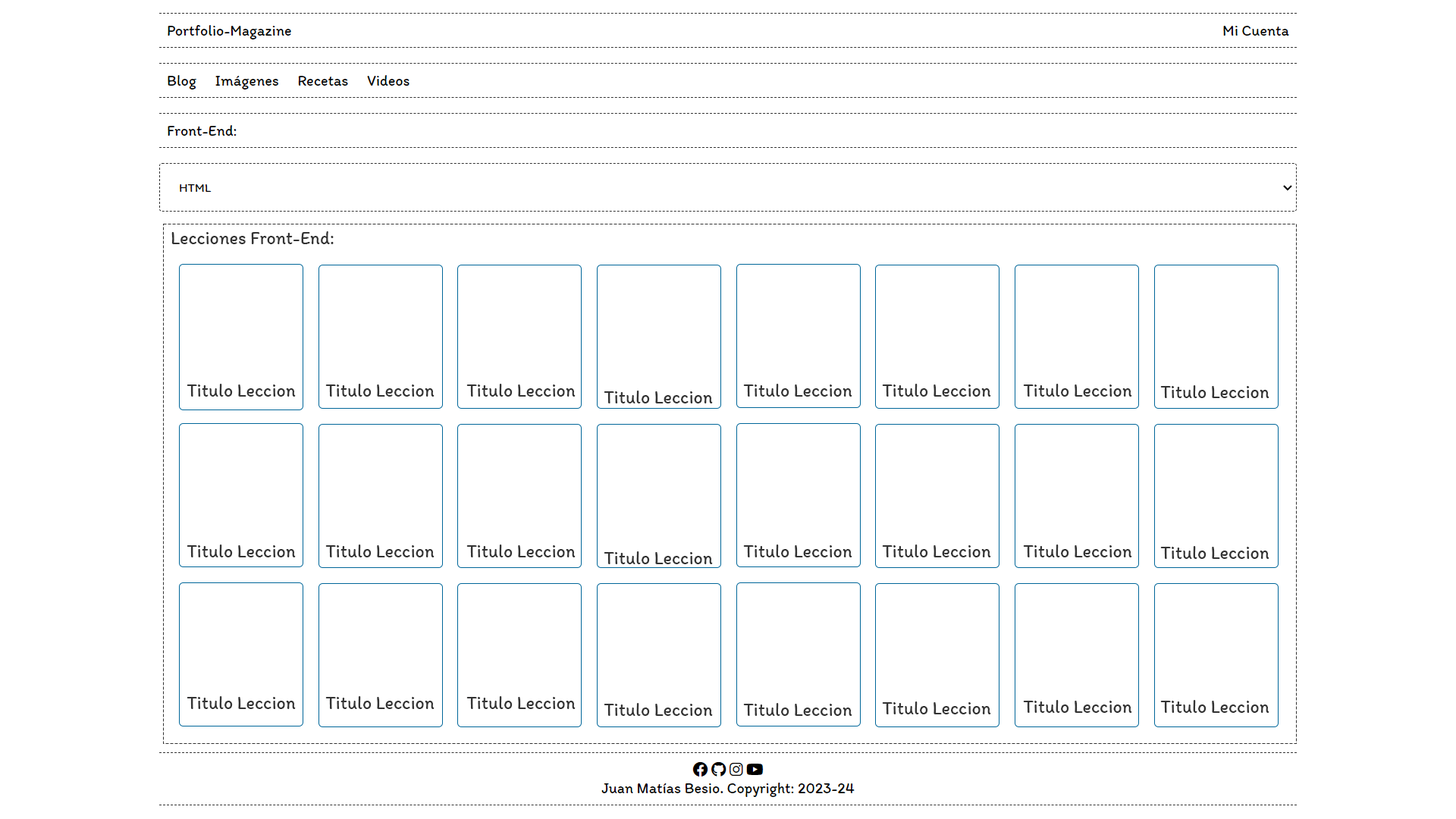
<style>
.page{position:relative;width:1456px;height:819px;background:#ffffff}
.page>*{position:absolute;margin:0}
.t1{font:18.2px "Itim-Regular";color:#333333}
</style>
<div class="page">
<p class="t1" style="left:171px;top:231px;width:163px;height:13px">Lecciones Front-End:</p>
<p class="t1" style="left:187px;top:384px;width:109px;height:13px">Titulo Leccion</p>
<p class="t1" style="left:325px;top:384px;width:110px;height:13px">Titulo Leccion</p>
<p class="t1" style="left:466px;top:384px;width:110px;height:13px">Titulo Leccion</p>
<p class="t1" style="left:743px;top:384px;width:109px;height:13px">Titulo Leccion</p>
<p class="t1" style="left:882px;top:384px;width:109px;height:13px">Titulo Leccion</p>
<p class="t1" style="left:1023px;top:384px;width:109px;height:13px">Titulo Leccion</p>
<p class="t1" style="left:1160px;top:385px;width:109px;height:13px">Titulo Leccion</p>
<p class="t1" style="left:604px;top:391px;width:109px;height:12px">Titulo Leccion</p>
<p class="t1" style="left:187px;top:544px;width:109px;height:13px">Titulo Leccion</p>
<p class="t1" style="left:325px;top:544px;width:110px;height:13px">Titulo Leccion</p>
<p class="t1" style="left:466px;top:544px;width:110px;height:13px">Titulo Leccion</p>
<p class="t1" style="left:743px;top:544px;width:109px;height:13px">Titulo Leccion</p>
<p class="t1" style="left:882px;top:544px;width:109px;height:13px">Titulo Leccion</p>
<p class="t1" style="left:1023px;top:544px;width:109px;height:13px">Titulo Leccion</p>
<p class="t1" style="left:1160px;top:546px;width:109px;height:13px">Titulo Leccion</p>
<p class="t1" style="left:604px;top:551px;width:109px;height:13px">Titulo Leccion</p>
<p class="t1" style="left:187px;top:696px;width:109px;height:13px">Titulo Leccion</p>
<p class="t1" style="left:325px;top:696px;width:110px;height:13px">Titulo Leccion</p>
<p class="t1" style="left:466px;top:696px;width:110px;height:13px">Titulo Leccion</p>
<p class="t1" style="left:882px;top:701px;width:109px;height:13px">Titulo Leccion</p>
<p class="t1" style="left:1023px;top:700px;width:109px;height:13px">Titulo Leccion</p>
<p class="t1" style="left:1160px;top:700px;width:109px;height:13px">Titulo Leccion</p>
<p class="t1" style="left:604px;top:703px;width:109px;height:13px">Titulo Leccion</p>
<p class="t1" style="left:743px;top:703px;width:109px;height:13px">Titulo Leccion</p>
</div>
